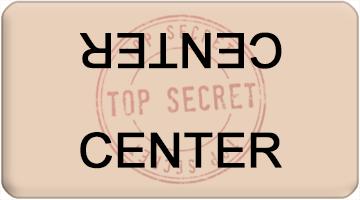
<style>
.page{position:relative;width:360px;height:200px;background:#e8d0bb}
.page>*{position:absolute;margin:0}
.t1{font:48px "ArialMT";color:#000000;font-weight:bold}
</style>
<div class="page">
<p class="t1" style="left:80px;top:32px;width:202px;height:37px;rotate:180deg">CENTER</p>
<p class="t1" style="left:80px;top:132px;width:202px;height:37px">CENTER</p>
</div>
